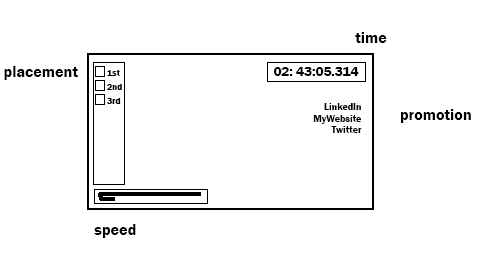
<style>
.page{position:relative;width:480px;height:270px;background:#ffffff}
.page>*{position:absolute;margin:0}
.t1{font:16px "FranklinGothic-Demi";color:#000000}
.t2{font:9.1px "FranklinGothic-Demi";color:#000000}
.t3{font:13.5px "FranklinGothic-Demi";color:#000000}
.t4{font:9.9px "FranklinGothic-Demi";color:#000000}
</style>
<div class="page">
<p class="t1" style="left:355px;top:32px;width:32px;height:11px">time</p>
<p class="t1" style="left:4px;top:66px;width:74px;height:14px">placement</p>
<p class="t2" style="left:107px;top:70px;width:13px;height:6px">1st</p>
<p class="t3" style="left:273px;top:66px;width:86px;height:10px">02: 43:05.314</p>
<p class="t2" style="left:107px;top:84px;width:15px;height:6px">2nd</p>
<p class="t2" style="left:107px;top:98px;width:14px;height:6px">3rd</p>
<p class="t4" style="left:313px;top:103px;width:49px;height:30px;text-align:right">LinkedIn<br>MyWebsite<br>Twitter</p>
<p class="t1" style="left:401px;top:109px;width:70px;height:14px">promotion</p>
<p class="t1" style="left:94px;top:224px;width:42px;height:14px">speed</p>
</div>
